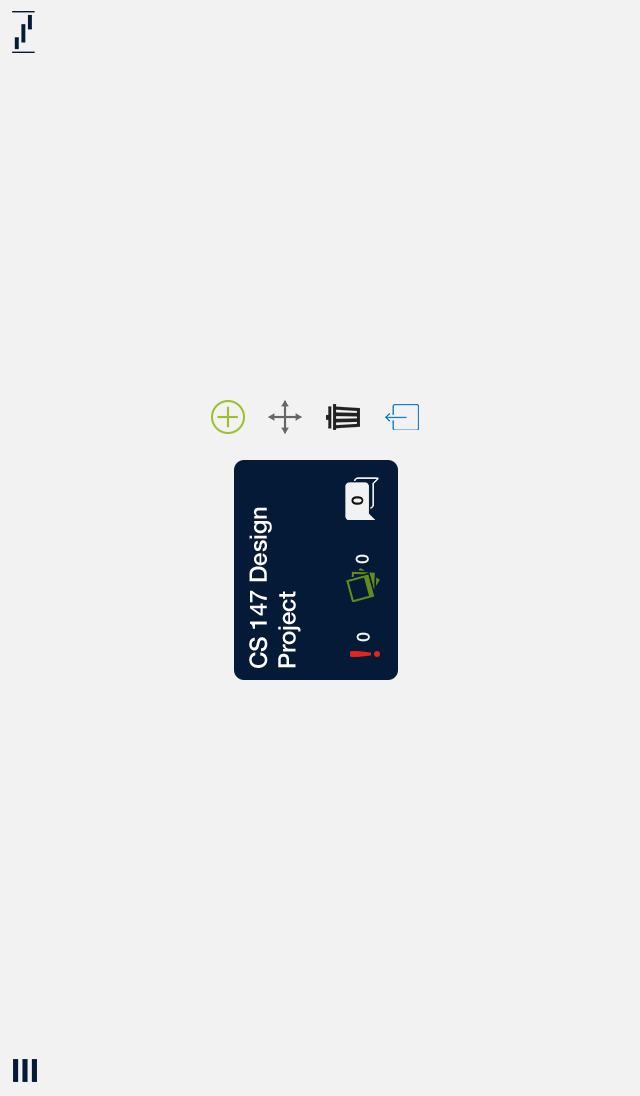
<style>
.page{position:relative;width:640px;height:1096px;background:#f2f2f2}
.page>*{position:absolute;margin:0}
.t1{font:16px "HelveticaNeue-Bold";color:#111111}
.t2{font:24px "HelveticaNeue-Medium";color:#ffffff}
.t3{font:18px "HelveticaNeue-Medium";color:#f2f2f2}
</style>
<div class="page">
<p class="t1" style="left:351px;top:496px;width:13px;height:9px;rotate:-90deg">0</p>
<p class="t2" style="left:249px;top:507px;width:52px;height:161px;rotate:-90deg">CS 147 Design Project</p>
<p class="t3" style="left:355px;top:554px;width:14px;height:10px;rotate:-90deg">0</p>
<p class="t3" style="left:356px;top:632px;width:14px;height:10px;rotate:-90deg">0</p>
</div>
